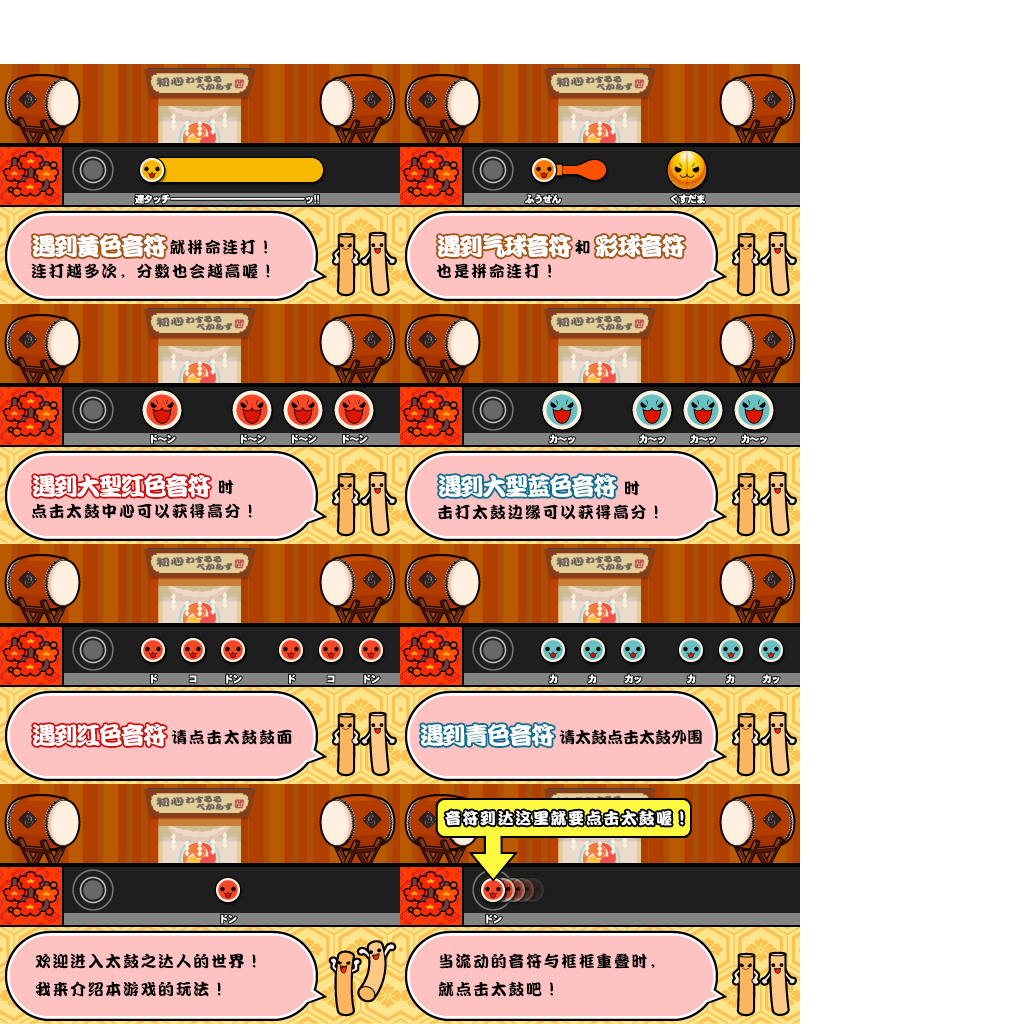
<style>
.page{position:relative;width:1024px;height:1024px;background:#ffffff}
.page>*{position:absolute;margin:0}
.t1{font:16px/24px "DFPKanTingLiuW9";letter-spacing:0.1em;color:#000000}
.t2{font:24px "DFPKanTingLiuW9";letter-spacing:-0.075em;color:#fffefe}
.t3{font:16px "DFPKanTingLiuW9";letter-spacing:0.1em;color:#000000}
.t4{font:16px "DFPKanTingLiuW9";color:#000000}
.t5{font:16px "DFPKanTingLiuW9";letter-spacing:0.1em;color:#ffffff}
</style>
<div class="page">
<p class="t1" style="left:31px;top:239px;width:239px;height:40px">就拼命连打！<br>连打越多次，分数也会越高喔！</p>
<p class="t2" style="left:32px;top:235px;width:134px;height:23px">遇到黄色音符</p>
<p class="t1" style="left:436px;top:239px;width:154px;height:40px">和<br>也是拼命连打！</p>
<p class="t2" style="left:437px;top:234px;width:248px;height:24px">遇到气球音符    彩球音符</p>
<p class="t1" style="left:32px;top:479px;width:220px;height:40px">时<br>点击太鼓中心可以获得高分！</p>
<p class="t2" style="left:33px;top:475px;width:178px;height:23px">遇到大型红色音符</p>
<p class="t1" style="left:438px;top:480px;width:220px;height:40px">时<br>击打太鼓边缘可以获得高分！</p>
<p class="t2" style="left:439px;top:475px;width:178px;height:23px">遇到大型蓝色音符</p>
<p class="t2" style="left:33px;top:724px;width:133px;height:23px">遇到红色音符</p>
<p class="t2" style="left:421px;top:724px;width:133px;height:23px">遇到青色音符</p>
<p class="t3" style="left:171px;top:729px;width:121px;height:16px">请点击太鼓鼓面</p>
<p class="t4" style="left:559px;top:729px;width:143px;height:16px">请太鼓点击太鼓外围</p>
<p class="t5" style="left:445px;top:810px;width:239px;height:16px">音符到达这里就要点击太鼓喔！</p>
<p class="t3" style="left:35px;top:953px;width:221px;height:44px">欢迎进入太鼓之达人的世界！<br>我来介绍本游戏的玩法！</p>
<p class="t3" style="left:438px;top:953px;width:217px;height:44px">当流动的音符与框框重叠时，<br>就点击太鼓吧！</p>
</div>
